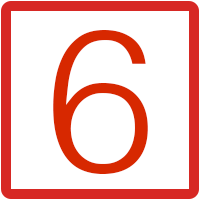
<style>
.page{position:relative;width:200px;height:200px;background:#ffffff}
.page>*{position:absolute;margin:0}
.t1{font:200px "Helvetica-Light";color:#d72800}
</style>
<div class="page">
<p class="t1" style="left:53px;top:30px;width:95px;height:144px">6</p>
</div>
